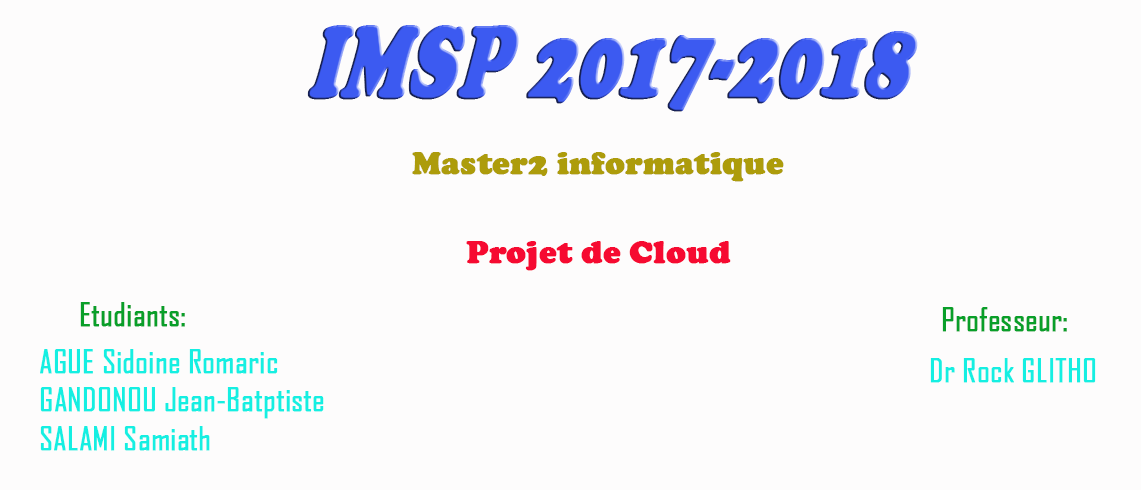
<style>
.page{position:relative;width:1141px;height:490px;background:#fdfcfc}
.page>*{position:absolute;margin:0}
.t1{font:110.1px "CooperBlack";color:#3c5af1;font-weight:bold;scale:0.66 1}
.t2{font:32px "CooperBlack";color:#ad9c0b;font-weight:bold}
.t3{font:32px "CooperBlack";color:#f60a31;font-weight:bold}
.t4{font:32px "AgencyFB-Reg";color:#099f29;font-weight:bold}
.t5{font:32px "AgencyFB-Reg";color:#15efe2;font-weight:bold}
</style>
<div class="page">
<p class="t1" style="left:307px;top:25px;width:611px;height:87px">IMSP 2017-2018</p>
<p class="t2" style="left:412px;top:152px;width:372px;height:30px">Master2 informatique</p>
<p class="t3" style="left:466px;top:241px;width:265px;height:30px">Projet de Cloud</p>
<p class="t4" style="left:80px;top:302px;width:105px;height:25px">Etudiants:</p>
<p class="t4" style="left:942px;top:307px;width:125px;height:25px">Professeur:</p>
<p class="t5" style="left:40px;top:349px;width:284px;height:102px">AGUE Sidoine Romaric<br>GANDONOU Jean-Batptiste<br>SALAMI Samiath</p>
<p class="t5" style="left:930px;top:358px;width:166px;height:25px">Dr Rock GLITHO</p>
</div>
